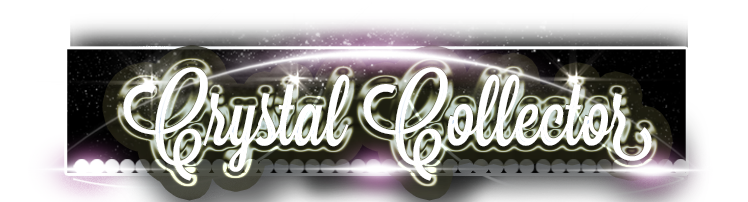
<style>
.page{position:relative;width:748px;height:202px;background:#ffffff}
.page>*{position:absolute;margin:0}
.t1{font:87.5px "Lavanderia-Sturdy";color:#ffffff}
</style>
<div class="page">
<p class="t1" style="left:123px;top:66px;width:529px;height:114px;opacity:0.95">Crystal Collector</p>
<p class="t1" style="left:123px;top:67px;width:529px;height:114px">Crystal Collector</p>
</div>
